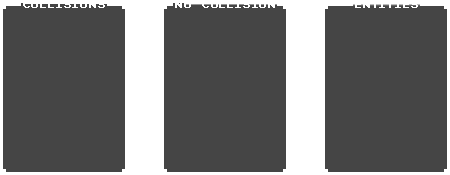
<style>
.page{position:relative;width:450px;height:175px;background:#454545}
.page>*{position:absolute;margin:0}
.t1{font:10px "PixelEmulator";letter-spacing:0.08em;color:#ffffff}
</style>
<div class="page">
<p class="t1" style="left:23px;top:1px;width:82px;height:7px">COLLISIONS</p>
<p class="t1" style="left:175px;top:1px;width:100px;height:7px">NO COLLISION</p>
<p class="t1" style="left:355px;top:1px;width:63px;height:7px">Entities</p>
</div>
